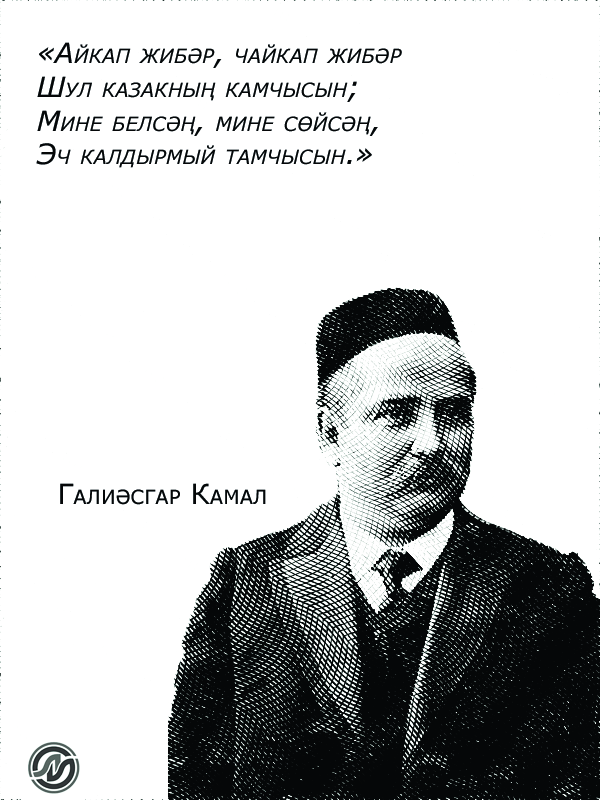
<style>
.page{position:relative;width:600px;height:800px;background:#ffffff}
.page>*{position:absolute;margin:0}
.t1{font:28px "Verdana-Italic";color:#000000;font-variant:small-caps}
.t2{font:28px "Verdana";color:#050708;font-variant:small-caps}
</style>
<div class="page">
<p class="t1" style="left:36px;top:42px;width:366px;height:126px">«Айкап жибәр, чайкап жибәр<br>Шул казакның камчысын;<br>Мине белсәң, мине сөйсәң,<br>Эч калдырмый тамчысын.»</p>
<p class="t2" style="left:60px;top:483px;width:206px;height:22px">Галиәсгар Камал</p>
</div>
